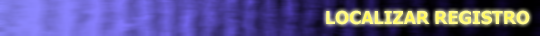
<style>
.page{position:relative;width:540px;height:36px}
.page>*{position:absolute;margin:0}
.t1{font:18px "Tahoma-Bold";color:#fffa80}
</style>
<div class="page">
<p class="t1" style="left:326px;top:10px;width:204px;height:15px">LOCALIZAR REGISTRO</p>
</div>
